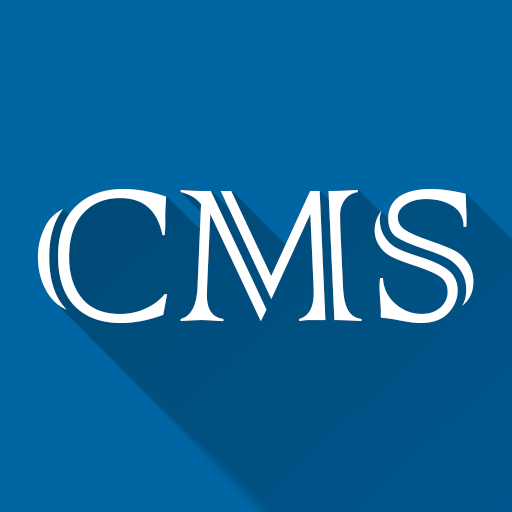
<style>
.page{position:relative;width:512px;height:512px;background:#0065a3}
.page>*{position:absolute;margin:0}
.t1{font:250px "ColonnaMT";letter-spacing:0.005em;color:#ffffff}
</style>
<div class="page">
<p class="t1" style="left:37px;top:189px;width:437px;height:134px">CMS</p>
</div>
